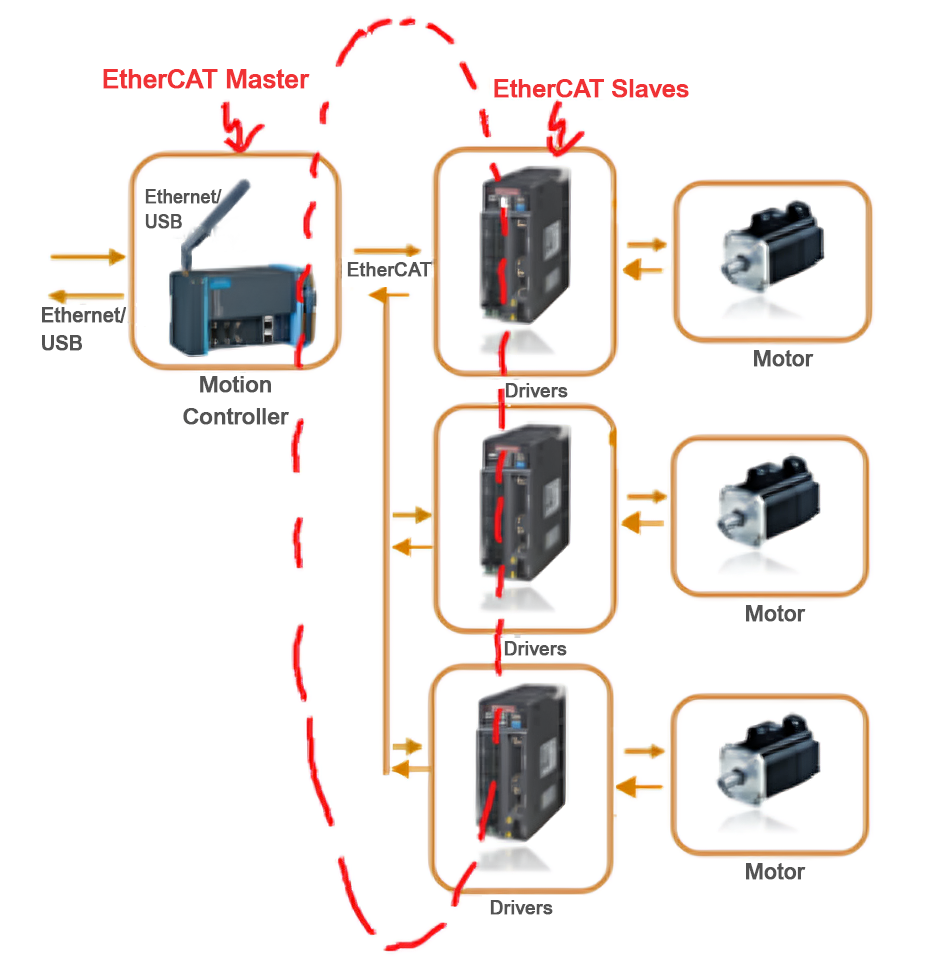
<style>
.page{position:relative;width:936px;height:980px;background:#ffffff}
.page>*{position:absolute;margin:0}
.t1{font:26px "ArialMT-Medium";letter-spacing:-0.02em;color:#f03235;font-weight:bold}
.t2{font:25px "ArialMT-Medium";letter-spacing:-0.02em;color:#f03235;font-weight:bold}
.t3{font:18px/25px "ArialMT-Medium";letter-spacing:-0.02em;color:#535353;font-weight:bold}
.t4{font:19px "ArialMT-Medium";letter-spacing:-0.02em;color:#535353;font-weight:bold}
.t5{font:20px/28px "ArialMT-Medium";letter-spacing:-0.02em;color:#535353;font-weight:bold}
.t6{font:22px "ArialMT-Medium";letter-spacing:-0.02em;color:#535353;font-weight:bold}
.t7{font:23px/32px "ArialMT-Medium";letter-spacing:-0.02em;color:#535353;font-weight:bold}
</style>
<div class="page">
<p class="t1" style="left:103px;top:69px;width:207px;height:20px">EtherCAT Master</p>
<p class="t2" style="left:494px;top:79px;width:195px;height:19px">EtherCAT Slaves</p>
<p class="t3" style="left:145px;top:189px;width:77px;height:40px">Ethernet/<br>USB</p>
<p class="t4" style="left:347px;top:262px;width:85px;height:15px">EtherCAT</p>
<p class="t5" style="left:42px;top:307px;width:85px;height:44px">Ethernet/<br>USB</p>
<p class="t6" style="left:754px;top:350px;width:60px;height:17px">Motor</p>
<p class="t7" style="left:183px;top:376px;width:106px;height:49px;text-align:center">Motion<br>Controller</p>
<p class="t4" style="left:505px;top:383px;width:63px;height:15px">Drivers</p>
<p class="t6" style="left:746px;top:605px;width:60px;height:17px">Motor</p>
<p class="t4" style="left:504px;top:641px;width:63px;height:15px">Drivers</p>
<p class="t6" style="left:746px;top:863px;width:60px;height:17px">Motor</p>
<p class="t4" style="left:490px;top:900px;width:63px;height:15px">Drivers</p>
</div>
